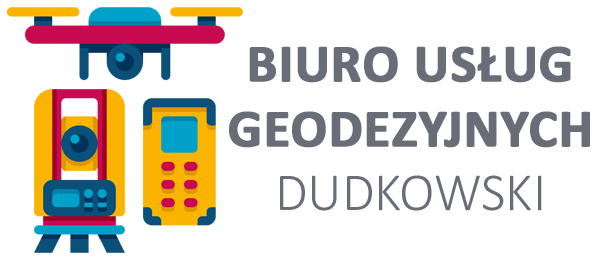
<style>
.page{position:relative;width:600px;height:260px;background:#ffffff}
.page>*{position:absolute;margin:0}
.t1{font:54px "Calibri-Bold";color:#696d77;font-weight:bold}
.t2{font:54px "Calibri-Light";color:#696d77}
</style>
<div class="page">
<p class="t1" style="left:229px;top:46px;width:361px;height:165px;text-align:center">BIURO USŁUG GEODEZYJNYCH <span class="t2">DUDKOWSKI</span></p>
</div>
